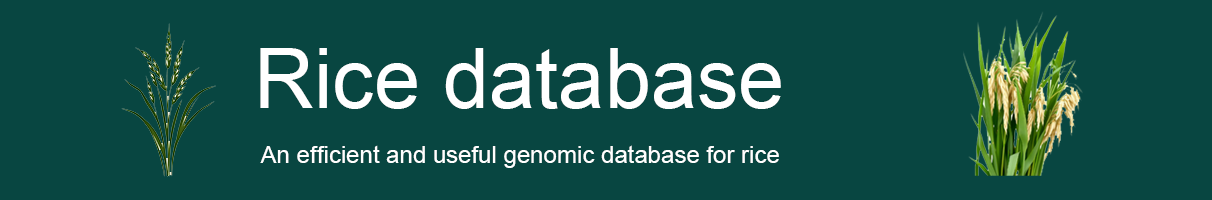
<style>
.page{position:relative;width:1212px;height:200px;background:#084641}
.page>*{position:absolute;margin:0}
.t1{font:83px "ArialMT";color:#ffffff}
.t2{font:24px "ArialMT";color:#ffffff}
</style>
<div class="page">
<p class="t1" style="left:260px;top:48px;width:521px;height:61px">Rice database</p>
<p class="t2" style="left:260px;top:145px;width:519px;height:23px">An efficient and useful genomic database for rice</p>
</div>
